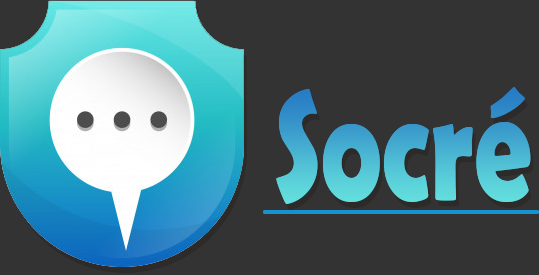
<style>
.page{position:relative;width:539px;height:275px;background:#333333}
.page>*{position:absolute;margin:0}
.t1{font:157px "BerlinSansFBDemi-Bold";scale:0.73 1}
</style>
<div class="page">
<p class="t1" style="left:276px;top:87px;width:255px;height:117px">Socré</p>
<p class="t1" style="left:276px;top:87px;width:255px;height:117px">Socré</p>
</div>
